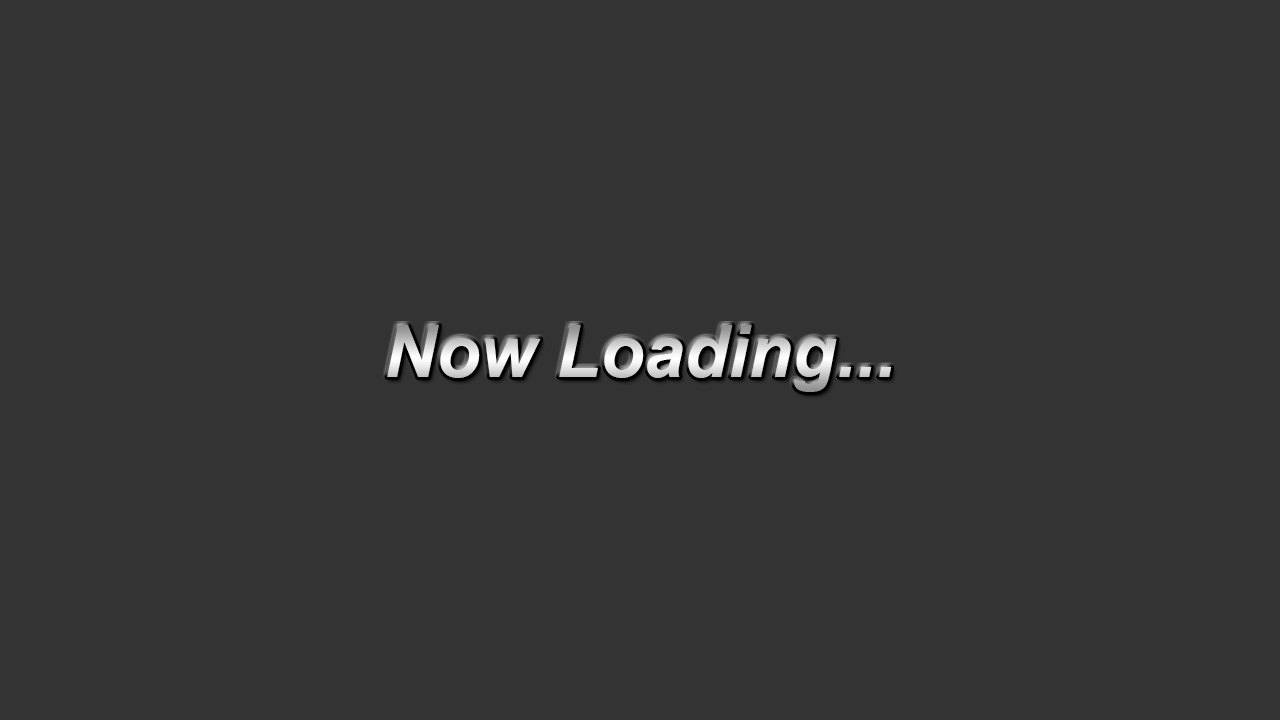
<style>
.page{position:relative;width:1280px;height:720px;background:#333333}
.page>*{position:absolute;margin:0}
.t1{font:72px "Arial-BoldItalicMT"}
</style>
<div class="page">
<p class="t1" style="left:387px;top:325px;width:505px;height:67px">Now Loading...</p>
</div>
